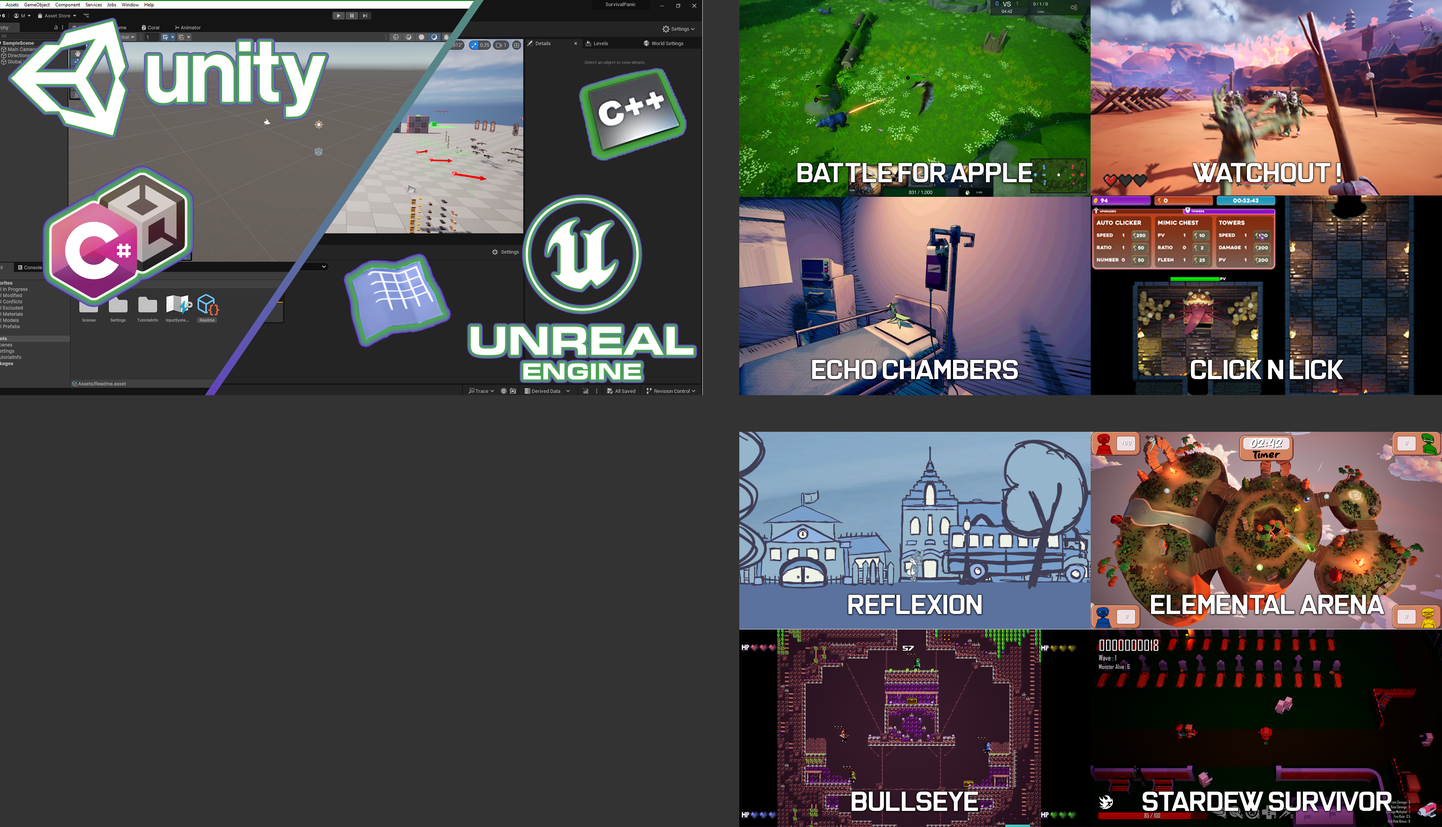
<style>
.page{position:relative;width:1442px;height:827px;background:#333333}
.page>*{position:absolute;margin:0}
.t1{font:29.3px "XHeighting";color:#ffffff}
</style>
<div class="page">
<p class="t1" style="left:797px;top:162px;width:236px;height:21px">Battle for apple</p>
<p class="t1" style="left:1192px;top:162px;width:149px;height:21px">watchout !</p>
<p class="t1" style="left:812px;top:359px;width:206px;height:20px">echo chambers</p>
<p class="t1" style="left:1190px;top:359px;width:154px;height:20px">Click n lick</p>
<p class="t1" style="left:848px;top:594px;width:134px;height:20px">Reflexion</p>
<p class="t1" style="left:1151px;top:594px;width:234px;height:20px">Elemental Arena</p>
<p class="t1" style="left:851px;top:791px;width:127px;height:20px">BullsEye</p>
<p class="t1" style="left:1142px;top:791px;width:250px;height:20px">Stardew Survivor</p>
</div>
